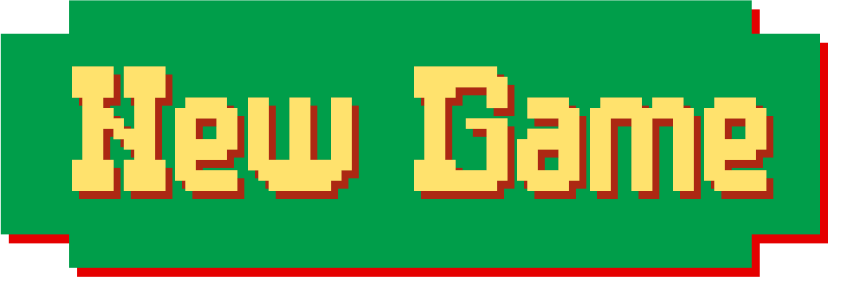
<style>
.page{position:relative;width:845px;height:285px;background:#009e4a}
.page>*{position:absolute;margin:0}
.t1{font:165.8px "Bandit";color:#ffe26d}
</style>
<div class="page">
<p class="t1" style="left:72px;top:66px;width:695px;height:125px">New Game</p>
</div>
